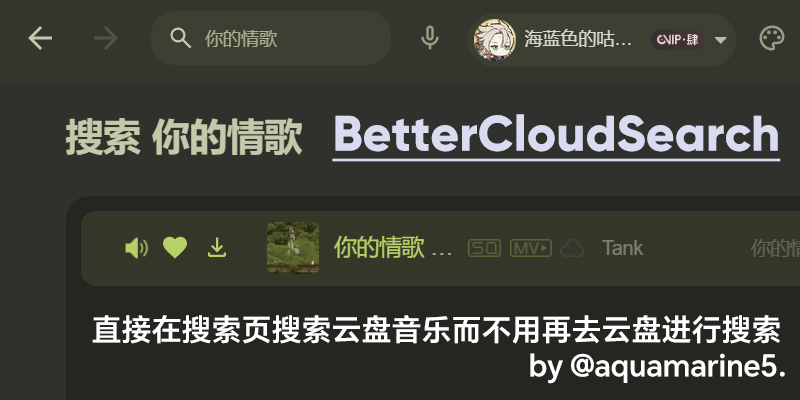
<style>
.page{position:relative;width:800px;height:400px;background:#30312c}
.page>*{position:absolute;margin:0}
.t1{font:50px "Gilroy-ExtraBold";color:#d9dbf0;text-decoration:underline}
.t2{font:30px/36px "HONORSansCN-DemiBold";color:#ffffff}
</style>
<div class="page">
<p class="t1" style="left:332px;top:114px;width:449px;height:48px">BetterCloudSearch</p>
<p class="t2" style="left:92px;top:315px;width:693px;height:69px">直接在搜索页搜索云盘音乐而不用再去云盘进行搜索<br>                                                             by @aquamarine5.</p>
</div>
